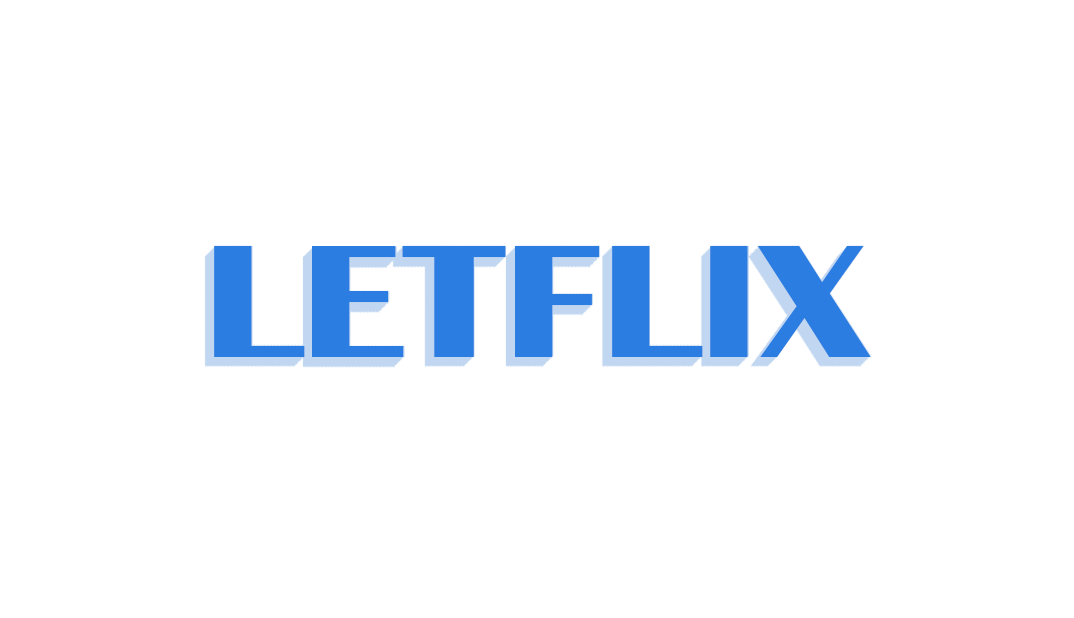
<style>
.page{position:relative;width:1074px;height:618px;background:#ffffff}
.page>*{position:absolute;margin:0}
.t1{font:165.6px "BritannicBold";color:#2b7de1;scale:1.17 1}
</style>
<div class="page">
<p class="t1" style="left:214px;top:246px;width:657px;height:111px">LETFLIX</p>
</div>
